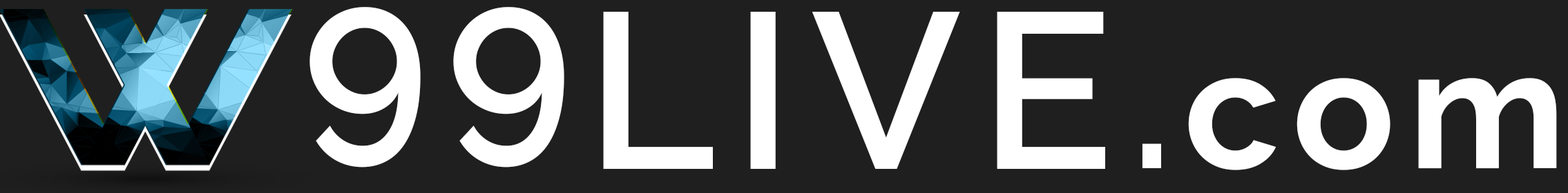
<style>
.page{position:relative;width:1568px;height:193px;background:#1f1f1f}
.page>*{position:absolute;margin:0}
.t1{font:221.3px "Raleway-SemiBold";letter-spacing:0.08em;color:#ffffff;scale:0.97 1}
.t2{font:222px "Raleway-SemiBold";letter-spacing:0.08em;color:#ffffff}
.t3{font:169.2px "Raleway-Bold";letter-spacing:0.08em;color:#ffffff}
</style>
<div class="page">
<p class="t1" style="left:309px;top:7px;width:255px;height:161px">99</p>
<p class="t2" style="left:603px;top:12px;width:502px;height:157px">LIVE</p>
<p class="t3" style="left:1142px;top:78px;width:415px;height:93px">.com</p>
</div>
